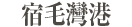
<style>
.page{position:relative;width:132px;height:27px;background:#ffffff}
.page>*{position:absolute;margin:0}
.t1{font:26px "RyuminPro-ExBold";letter-spacing:-0.04em;color:#4c4843;scale:0.9 1}
</style>
<div class="page">
<p class="t1" style="left:21px;top:1px;width:90px;height:26px">宿毛灣港</p>
</div>
